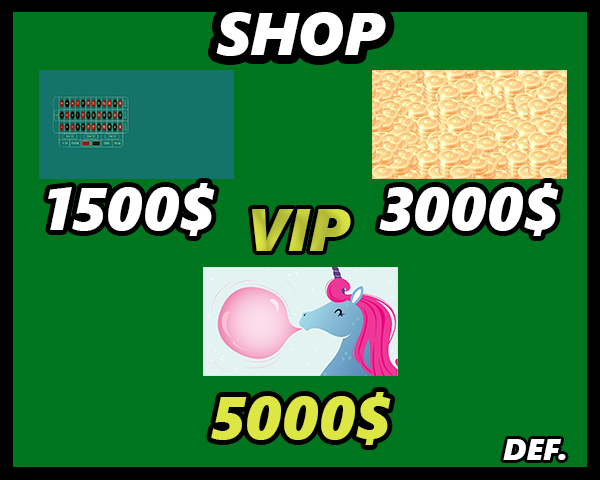
<style>
.page{position:relative;width:600px;height:480px;background:#007520}
.page>*{position:absolute;margin:0}
.t1{font:60px "SegoeUIBlack-Italic";color:#ffffff}
.t2{font:60px "SegoeUIBlack-Italic";color:#bcc53a}
.t3{font:60px "SegoeUIBlack-Italic";color:#dde744}
.t4{font:30px "SegoeUIBlack-Italic";color:#ffffff}
</style>
<div class="page">
<p class="t1" style="left:216px;top:12px;width:170px;height:44px">SHOP</p>
<p class="t1" style="left:48px;top:183px;width:167px;height:53px">1500$</p>
<p class="t1" style="left:379px;top:183px;width:180px;height:53px">3000$</p>
<p class="t2" style="left:252px;top:209px;width:99px;height:42px">VIP</p>
<p class="t3" style="left:211px;top:392px;width:180px;height:53px">5000$</p>
<p class="t4" style="left:503px;top:439px;width:63px;height:21px">DEF.</p>
</div>
